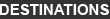
<style>
.page{position:relative;width:110px;height:19px;background:#333333}
.page>*{position:absolute;margin:0}
.t1{font:15px "Arial-BoldMT";color:#ffffff;text-transform:uppercase}
</style>
<div class="page">
<p class="t1" style="left:0px;top:4px;width:109px;height:11px">DESTINATIONS</p>
</div>
